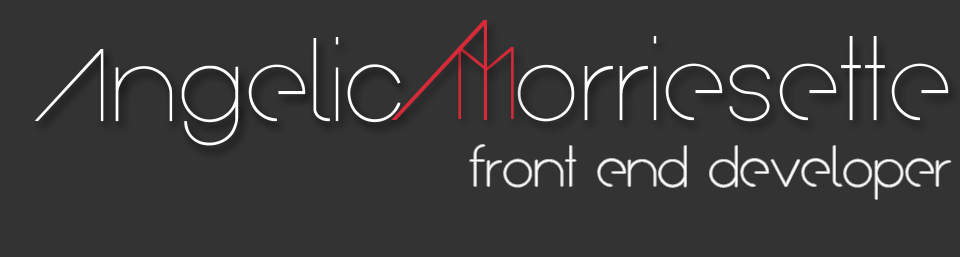
<style>
.page{position:relative;width:960px;height:257px;background:#333333}
.page>*{position:absolute;margin:0}
.t1{font:140.7px "Arual";color:#d72a38}
.t2{font:100.7px "Arual";color:#ffffff}
.t3{font:101px "Arual";color:#fdfefe}
.t4{font:101px "Arual";color:#d72a38}
.t5{font:48px "Arual";color:#ffffff}
</style>
<div class="page">
<p class="t1" style="left:391px;top:20px;width:96px;height:100px">A</p>
<p class="t2" style="left:34px;top:37px;width:367px;height:109px">Angelic</p>
<p class="t3" style="left:517px;top:36px;width:432px;height:86px">orriesette</p>
<p class="t4" style="left:458px;top:47px;width:56px;height:72px">M</p>
<p class="t5" style="left:470px;top:145px;width:481px;height:54px">front end developer</p>
</div>
